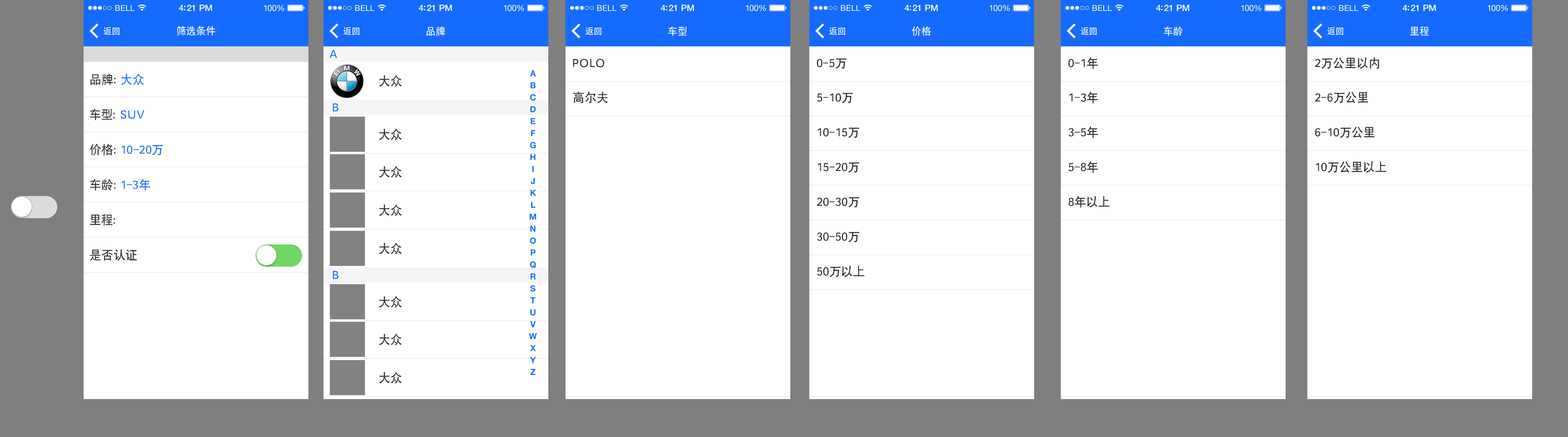
<style>
.page{position:relative;width:1568px;height:437px;background:#ffffff}
.page>*{position:absolute;margin:0}
.t1{font:8.4px "SIL-Hei-Med-Jian";color:#ffffff}
.t2{font:9.8px "SIL-Hei-Med-Jian";color:#ffffff}
.t3{font:11.9px "SIL-Hei-Med-Jian";color:#156bff}
.t4{font:11.9px "SIL-Hei-Med-Jian";color:#282828}
.t5{font:11.9px/35.1px "SIL-Hei-Med-Jian";color:#282828}
.t6{font:11.9px/35.1px "SIL-Hei-Med-Jian";color:#156bff}
.t7{font:8.4px/11.9px "HelveticaNeue-Bold";color:#156bff}
</style>
<div class="page">
<p class="t1" style="left:104px;top:27px;width:15px;height:8px">返回</p>
<p class="t2" style="left:177px;top:26px;width:38px;height:9px">筛选条件</p>
<p class="t1" style="left:344px;top:27px;width:15px;height:8px">返回</p>
<p class="t2" style="left:426px;top:26px;width:19px;height:10px">品牌</p>
<p class="t1" style="left:586px;top:27px;width:15px;height:8px">返回</p>
<p class="t2" style="left:668px;top:26px;width:19px;height:10px">车型</p>
<p class="t1" style="left:829px;top:27px;width:16px;height:8px">返回</p>
<p class="t2" style="left:912px;top:26px;width:19px;height:10px">价格</p>
<p class="t1" style="left:1081px;top:27px;width:16px;height:8px">返回</p>
<p class="t2" style="left:1164px;top:26px;width:19px;height:10px">车龄</p>
<p class="t1" style="left:1327px;top:27px;width:16px;height:8px">返回</p>
<p class="t2" style="left:1410px;top:26px;width:19px;height:10px">里程</p>
<p class="t3" style="left:329px;top:50px;width:8px;height:8px">A</p>
<p class="t4" style="left:573px;top:59px;width:31px;height:8px">POLO</p>
<p class="t4" style="left:817px;top:58px;width:30px;height:11px">0-5万</p>
<p class="t4" style="left:1068px;top:57px;width:30px;height:12px">0-1年</p>
<p class="t4" style="left:1315px;top:57px;width:64px;height:12px">2万公里以内</p>
<p class="t5" style="left:90px;top:73px;width:73px;height:188px">品牌：<span class="t6">大众<br></span>车型：<span class="t6">SUV<br></span>价格：<span class="t6">10-20万<br></span>车龄：<span class="t6">1-3年<br></span>里程： <br>是否认证</p>
<p class="t4" style="left:379px;top:75px;width:23px;height:12px">大众</p>
<p class="t7" style="left:529px;top:70px;width:8px;height:305px;text-align:center">A<br>B<br>C<br>D<br>E<br>F<br>G<br>H<br>I<br>J<br>K<br>L<br>M<br>N<br>O<br>P<br>Q<br>R<br>S<br>T<br>U<br>V<br>W<br>X<br>Y<br>Z</p>
<p class="t4" style="left:573px;top:91px;width:35px;height:12px">高尔夫</p>
<p class="t4" style="left:817px;top:93px;width:36px;height:10px">5-10万</p>
<p class="t4" style="left:1069px;top:92px;width:29px;height:11px">1-3年</p>
<p class="t4" style="left:1315px;top:92px;width:53px;height:11px">2-6万公里</p>
<p class="t3" style="left:333px;top:103px;width:6px;height:8px">B</p>
<p class="t4" style="left:379px;top:129px;width:23px;height:11px">大众</p>
<p class="t4" style="left:818px;top:128px;width:41px;height:10px">10-15万</p>
<p class="t4" style="left:1069px;top:126px;width:29px;height:12px">3-5年</p>
<p class="t4" style="left:1315px;top:127px;width:59px;height:11px">6-10万公里</p>
<p class="t4" style="left:1069px;top:161px;width:29px;height:12px">5-8年</p>
<p class="t4" style="left:1316px;top:161px;width:70px;height:12px">10万公里以上</p>
<p class="t4" style="left:379px;top:166px;width:23px;height:12px">大众</p>
<p class="t4" style="left:818px;top:162px;width:41px;height:11px">15-20万</p>
<p class="t4" style="left:817px;top:197px;width:42px;height:11px">20-30万</p>
<p class="t4" style="left:1069px;top:196px;width:41px;height:12px">8年以上</p>
<p class="t4" style="left:379px;top:204px;width:23px;height:12px">大众</p>
<p class="t4" style="left:817px;top:232px;width:42px;height:10px">30-50万</p>
<p class="t4" style="left:379px;top:243px;width:23px;height:11px">大众</p>
<p class="t4" style="left:817px;top:266px;width:47px;height:11px">50万以上</p>
<p class="t3" style="left:333px;top:271px;width:6px;height:8px">B</p>
<p class="t4" style="left:379px;top:296px;width:23px;height:12px">大众</p>
<p class="t4" style="left:379px;top:334px;width:23px;height:11px">大众</p>
<p class="t4" style="left:379px;top:372px;width:23px;height:12px">大众</p>
</div>
